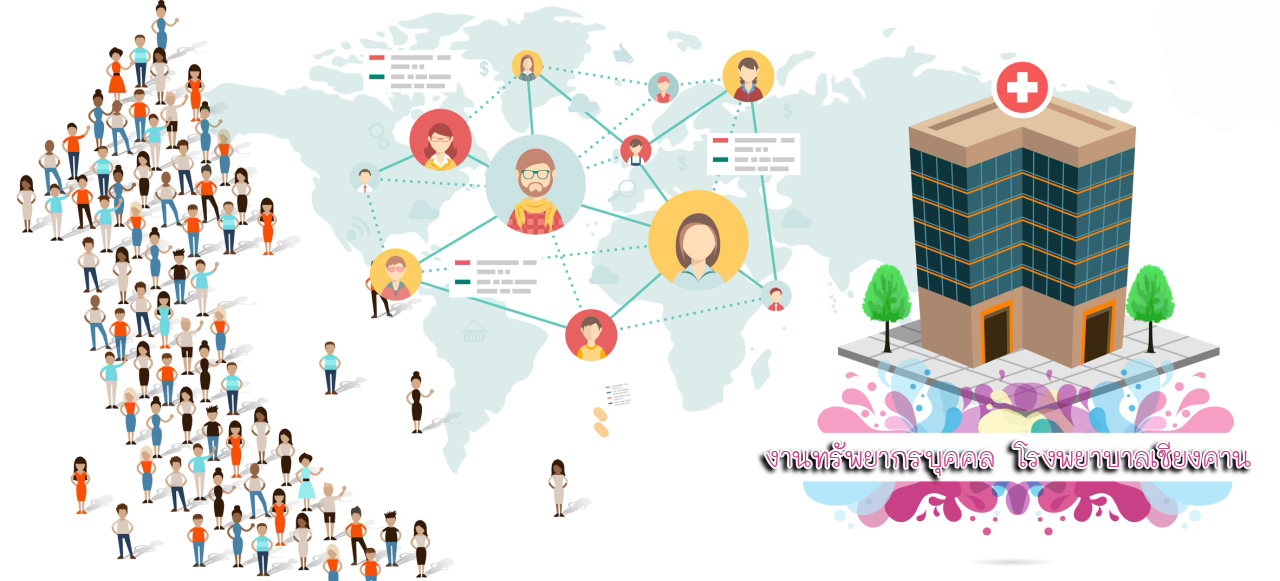
<style>
.page{position:relative;width:1280px;height:581px;background:#ffffff}
.page>*{position:absolute;margin:0}
.t1{font:44px "THMaliGrade6-Bold";color:#c84088}
</style>
<div class="page">
<p class="t1" style="left:766px;top:441px;width:485px;height:36px">งานทรัพยากรบุคคล โรงพยาบาลเชียงคาน</p>
</div>
